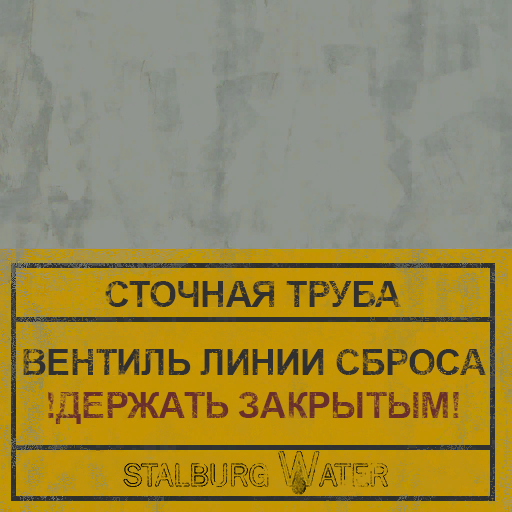
<style>
.page{position:relative;width:512px;height:512px}
.page>*{position:absolute;margin:0}
.t1{font:36px "Arial-BoldMT";letter-spacing:-0.02em;color:#303030}
.t2{font:36px "Arial-BoldMT";letter-spacing:-0.02em;color:#672f2c}
</style>
<div class="page">
<p class="t1" style="left:105px;top:281px;width:296px;height:26px">СТОЧНАЯ ТРУБА</p>
<p class="t1" style="left:23px;top:349px;width:463px;height:26px">ВЕНТИЛЬ ЛИНИИ СБРОСА</p>
<p class="t2" style="left:48px;top:392px;width:411px;height:32px">!ДЕРЖАТЬ ЗАКРЫТЫМ!</p>
</div>
